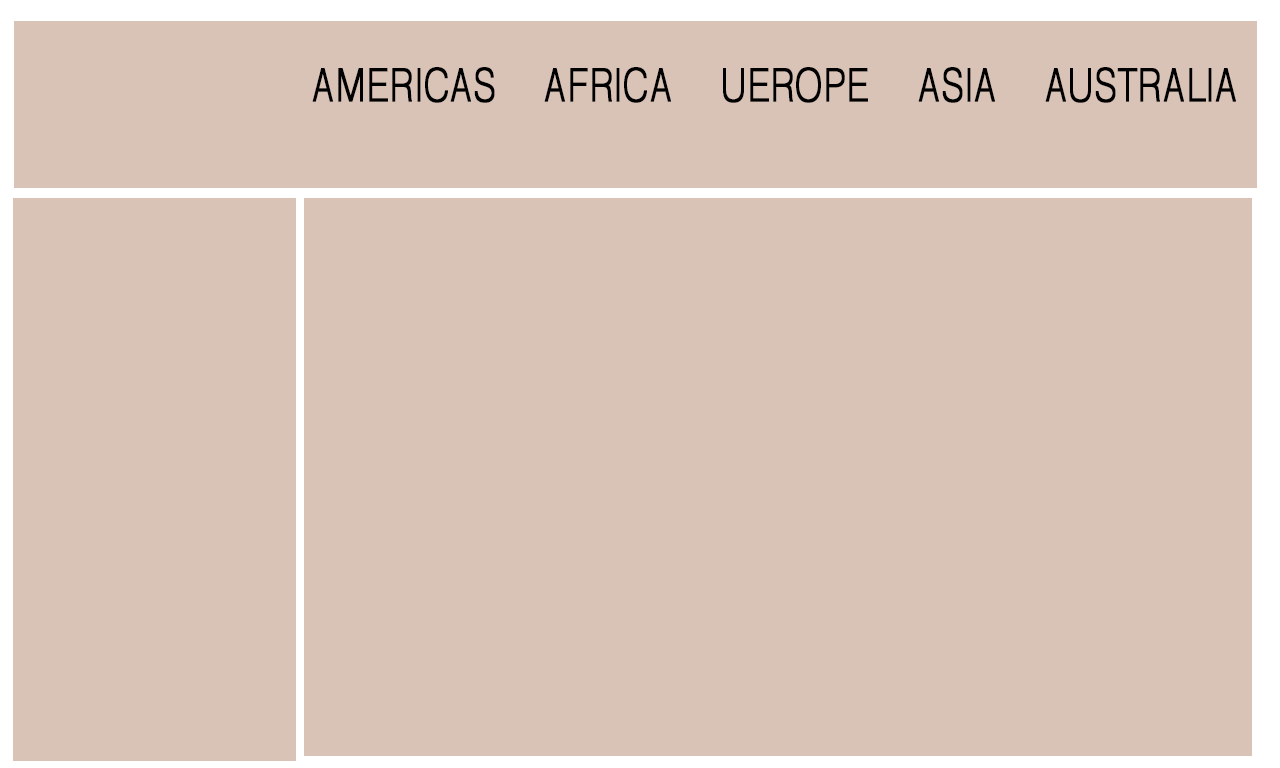
<style>
.page{position:relative;width:1280px;height:768px;background:#d9c3b7}
.page>*{position:absolute;margin:0}
.t1{font:46.1px "CATIA-Symbols";letter-spacing:-0.03em;color:#000000;font-weight:bold;scale:0.83 1}
</style>
<div class="page">
<p class="t1" style="left:312px;top:67px;width:924px;height:36px">AMERICAS     AFRICA     UEROPE     ASIA     AUSTRALIA</p>
</div>
